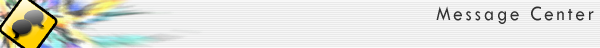
<style>
.page{position:relative;width:600px;height:48px;background:#f6f6f6}
.page>*{position:absolute;margin:0}
.t1{font:21px "TwCenMT-Regular";letter-spacing:0.2em;color:#333333;scale:0.9 1}
</style>
<div class="page">
<p class="t1" style="left:436px;top:6px;width:158px;height:18px">Message Center</p>
</div>
